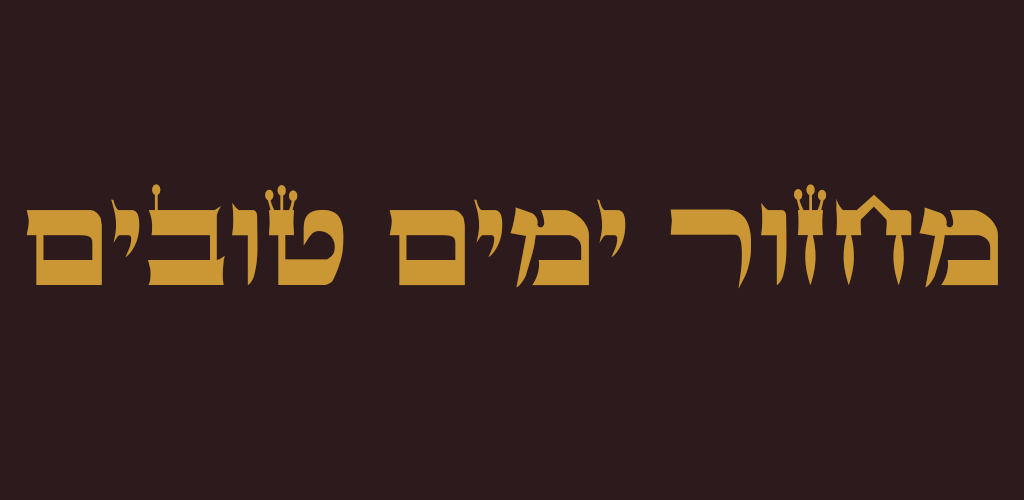
<style>
.page{position:relative;width:1024px;height:500px;background:#2c1a1d}
.page>*{position:absolute;margin:0}
.t1{font:145.8px "StamAshkenazCLM";color:#cb9634}
</style>
<div class="page">
<p class="t1" style="left:26px;top:184px;width:972px;height:105px">םיבוט םימי רוזחמ</p>
</div>
